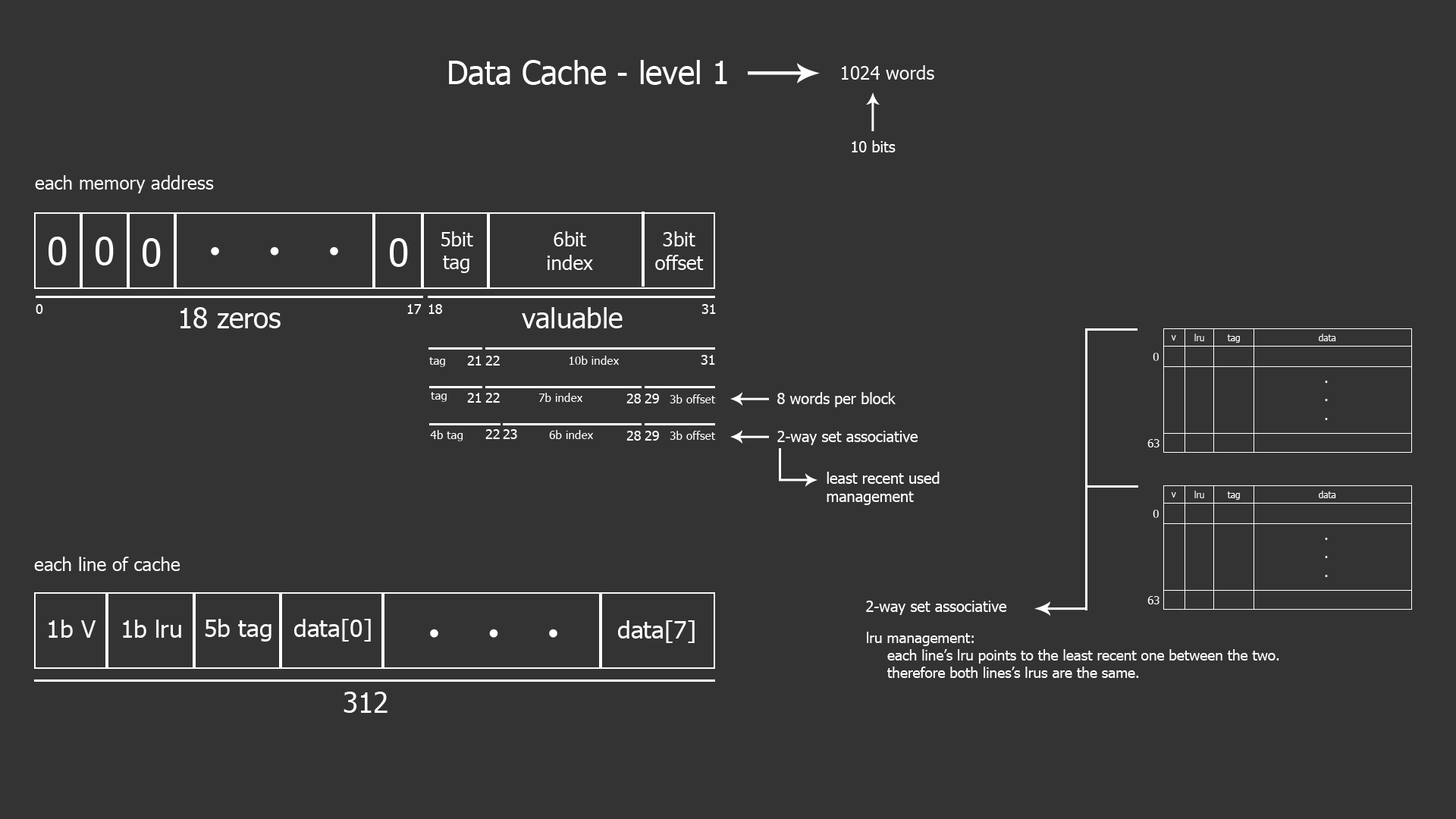
<style>
.page{position:relative;width:1456px;height:819px;background:#333333}
.page>*{position:absolute;margin:0}
.t1{font:31.8px "Tahoma";color:#ffffff}
.t2{font:18.4px "Tahoma";color:#ffffff}
.t3{font:15.1px "Tahoma";color:#ffffff}
.t4{font:19.6px "Tahoma";color:#ffffff}
.t5{font:38px "Tahoma";color:#ffffff}
.t6{font:49.6px "Consolas";color:#ffffff}
.t7{font:13.6px "Tahoma";color:#ffffff}
.t8{font:27.9px "Tahoma";color:#ffffff}
.t9{font:9.1px "Tahoma";color:#ffffff}
.t10{font:11.1px "Tahoma";color:#ffffff}
.t11{font:11.7px "Tahoma";color:#ffffff}
.t12{font:15.3px "Tahoma";color:#ffffff}
.t13{font:24.3px "Tahoma";color:#ffffff}
.t14{font:14.4px "Tahoma";color:#ffffff}
</style>
<div class="page">
<p class="t1" style="left:449px;top:60px;width:278px;height:25px">Data Cache - level 1</p>
<p class="t2" style="left:842px;top:65px;width:92px;height:15px">1024 words</p>
<p class="t3" style="left:852px;top:140px;width:44px;height:12px">10 bits</p>
<p class="t2" style="left:35px;top:175px;width:179px;height:18px">each memory address</p>
<p class="t4" style="left:441px;top:231px;width:32px;height:42px;text-align:center">5bit<br>tag</p>
<p class="t4" style="left:548px;top:231px;width:45px;height:39px;text-align:center">6bit<br>index</p>
<p class="t4" style="left:655px;top:231px;width:49px;height:39px;text-align:center">3bit<br>offset</p>
<p class="t5" style="left:49px;top:237px;width:18px;height:28px">0</p>
<p class="t5" style="left:96px;top:237px;width:18px;height:28px">0</p>
<p class="t5" style="left:143px;top:238px;width:18px;height:29px">0</p>
<p class="t5" style="left:390px;top:238px;width:18px;height:29px">0</p>
<p class="t6" style="left:211px;top:246px;width:127px;height:10px;text-align:center;rotate:-90deg">.<br>.<br>.</p>
<p class="t7" style="left:36px;top:304px;width:7px;height:10px">0</p>
<p class="t7" style="left:407px;top:304px;width:15px;height:10px">17</p>
<p class="t7" style="left:428px;top:304px;width:14px;height:10px">18</p>
<p class="t7" style="left:701px;top:304px;width:15px;height:10px">31</p>
<p class="t8" style="left:180px;top:307px;width:101px;height:21px">18 zeros</p>
<p class="t8" style="left:522px;top:307px;width:101px;height:21px">valuable</p>
<p class="t9" style="left:1171px;top:335px;width:5px;height:5px">v</p>
<p class="t9" style="left:1194px;top:334px;width:10px;height:7px">lru</p>
<p class="t9" style="left:1227px;top:334px;width:13px;height:9px">tag</p>
<p class="t9" style="left:1319px;top:334px;width:17px;height:7px">data</p>
<p class="t10" style="left:1153px;top:353px;width:6px;height:8px">0</p>
<p class="t11" style="left:429px;top:357px;width:16px;height:10px">tag</p>
<p class="t7" style="left:467px;top:356px;width:15px;height:10px">21</p>
<p class="t7" style="left:485px;top:356px;width:15px;height:10px">22</p>
<p class="t11" style="left:570px;top:356px;width:49px;height:9px">10b index</p>
<p class="t7" style="left:701px;top:355px;width:14px;height:10px">31</p>
<p class="t12" style="left:1325px;top:381px;width:3px;height:39px">.<br>.<br>.</p>
<p class="t11" style="left:431px;top:392px;width:16px;height:10px">tag</p>
<p class="t7" style="left:467px;top:393px;width:15px;height:10px">21</p>
<p class="t7" style="left:485px;top:393px;width:15px;height:10px">22</p>
<p class="t11" style="left:538px;top:393px;width:44px;height:9px">7b index</p>
<p class="t7" style="left:626px;top:394px;width:15px;height:9px">28</p>
<p class="t7" style="left:645px;top:394px;width:14px;height:9px">29</p>
<p class="t11" style="left:670px;top:394px;width:46px;height:9px">3b offset</p>
<p class="t3" style="left:777px;top:392px;width:119px;height:15px">8 words per block</p>
<p class="t11" style="left:430px;top:430px;width:33px;height:11px">4b tag</p>
<p class="t7" style="left:485px;top:429px;width:15px;height:10px">22</p>
<p class="t7" style="left:503px;top:429px;width:14px;height:10px">23</p>
<p class="t11" style="left:549px;top:430px;width:44px;height:9px">6b index</p>
<p class="t7" style="left:626px;top:431px;width:15px;height:10px">28</p>
<p class="t7" style="left:645px;top:431px;width:14px;height:10px">29</p>
<p class="t11" style="left:670px;top:431px;width:46px;height:9px">3b offset</p>
<p class="t3" style="left:777px;top:431px;width:141px;height:14px">2-way set associative</p>
<p class="t10" style="left:1147px;top:439px;width:12px;height:8px">63</p>
<p class="t3" style="left:827px;top:472px;width:113px;height:33px">least recent used<br>management</p>
<p class="t9" style="left:1171px;top:492px;width:5px;height:5px">v</p>
<p class="t9" style="left:1194px;top:491px;width:10px;height:7px">lru</p>
<p class="t9" style="left:1227px;top:491px;width:13px;height:9px">tag</p>
<p class="t9" style="left:1319px;top:491px;width:17px;height:7px">data</p>
<p class="t10" style="left:1153px;top:510px;width:6px;height:8px">0</p>
<p class="t12" style="left:1325px;top:538px;width:3px;height:39px">.<br>.<br>.</p>
<p class="t2" style="left:34px;top:557px;width:146px;height:14px">each line of cache</p>
<p class="t3" style="left:866px;top:601px;width:141px;height:14px">2-way set associative</p>
<p class="t10" style="left:1147px;top:596px;width:12px;height:8px">63</p>
<p class="t13" style="left:49px;top:620px;width:47px;height:18px">1b V</p>
<p class="t13" style="left:123px;top:620px;width:58px;height:18px">1b lru</p>
<p class="t13" style="left:205px;top:619px;width:66px;height:23px">5b tag</p>
<p class="t13" style="left:294px;top:619px;width:77px;height:23px">data[0]</p>
<p class="t6" style="left:430px;top:629px;width:127px;height:9px;text-align:center;rotate:-90deg">.<br>.<br>.</p>
<p class="t13" style="left:618px;top:620px;width:77px;height:23px">data[7]</p>
<p class="t14" style="left:867px;top:632px;width:412px;height:46px">lru management:<br> each line’s lru points to the least recent one between the two.<br> therefore both lines’s lrus are the same.</p>
<p class="t8" style="left:344px;top:692px;width:44px;height:21px">312</p>
</div>
